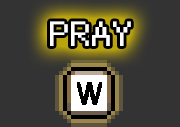
<style>
.page{position:relative;width:180px;height:127px;background:#333333}
.page>*{position:absolute;margin:0}
.t1{font:49px "Silver";color:#ffffff;scale:1.3 1}
</style>
<div class="page">
<p class="t1" style="left:50px;top:21px;width:81px;height:25px">PRAY</p>
</div>
